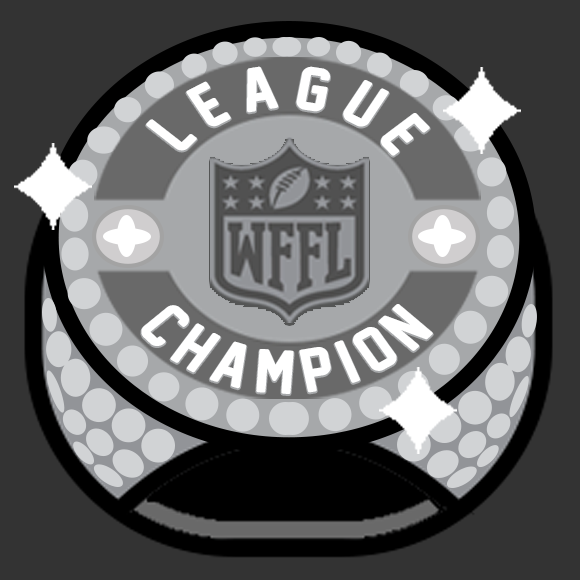
<style>
.page{position:relative;width:580px;height:580px;background:#333333}
.page>*{position:absolute;margin:0}
.t1{font:56.6px "NewAthleticM54";letter-spacing:0.2em;color:#ffffff;scale:1.14 1}
</style>
<div class="page">
<p class="t1" style="left:146px;top:66px;width:284px;height:90px;rotate:4deg">LEAguE</p>
<p class="t1" style="left:141px;top:304px;width:292px;height:90px;rotate:2deg">CHAMPION</p>
</div>
